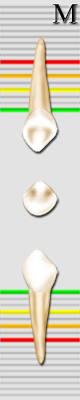
<style>
.page{position:relative;width:80px;height:400px;background:#e4e3e3}
.page>*{position:absolute;margin:0}
.t1{font:28.4px "TimesNewRomanPSMT";letter-spacing:0.005em;color:#000000}
</style>
<div class="page">
<p class="t1" style="left:52px;top:4px;width:26px;height:19px">M</p>
</div>
